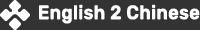
<style>
.page{position:relative;width:200px;height:30px;background:#333333}
.page>*{position:absolute;margin:0}
.t1{font:19px "Rubik-Medium";color:#ffffff;font-weight:bold;scale:0.95 1}
</style>
<div class="page">
<p class="t1" style="left:39px;top:4px;width:161px;height:20px">English 2 Chinese</p>
</div>
